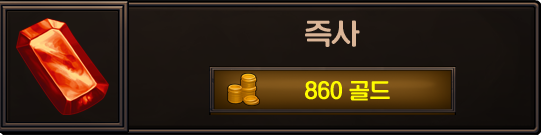
<style>
.page{position:relative;width:541px;height:135px}
.page>*{position:absolute;margin:0}
.t1{font:27.7px "KoreanNGL3-R";color:#dab597}
.t2{font:20.8px "KoreanNGL3-R";color:#fffc00}
</style>
<div class="page">
<p class="t1" style="left:305px;top:20px;width:55px;height:27px">즉사</p>
<p class="t2" style="left:305px;top:81px;width:85px;height:20px">860 골드</p>
</div>
